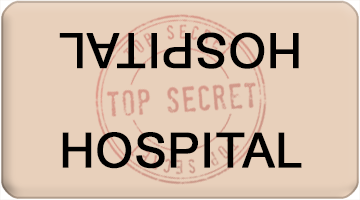
<style>
.page{position:relative;width:360px;height:200px;background:#e8d0bb}
.page>*{position:absolute;margin:0}
.t1{font:48px "ArialMT";color:#000000;font-weight:bold}
</style>
<div class="page">
<p class="t1" style="left:59px;top:32px;width:240px;height:37px;rotate:180deg">HOSPITAL</p>
<p class="t1" style="left:62px;top:132px;width:240px;height:37px">HOSPITAL</p>
</div>
